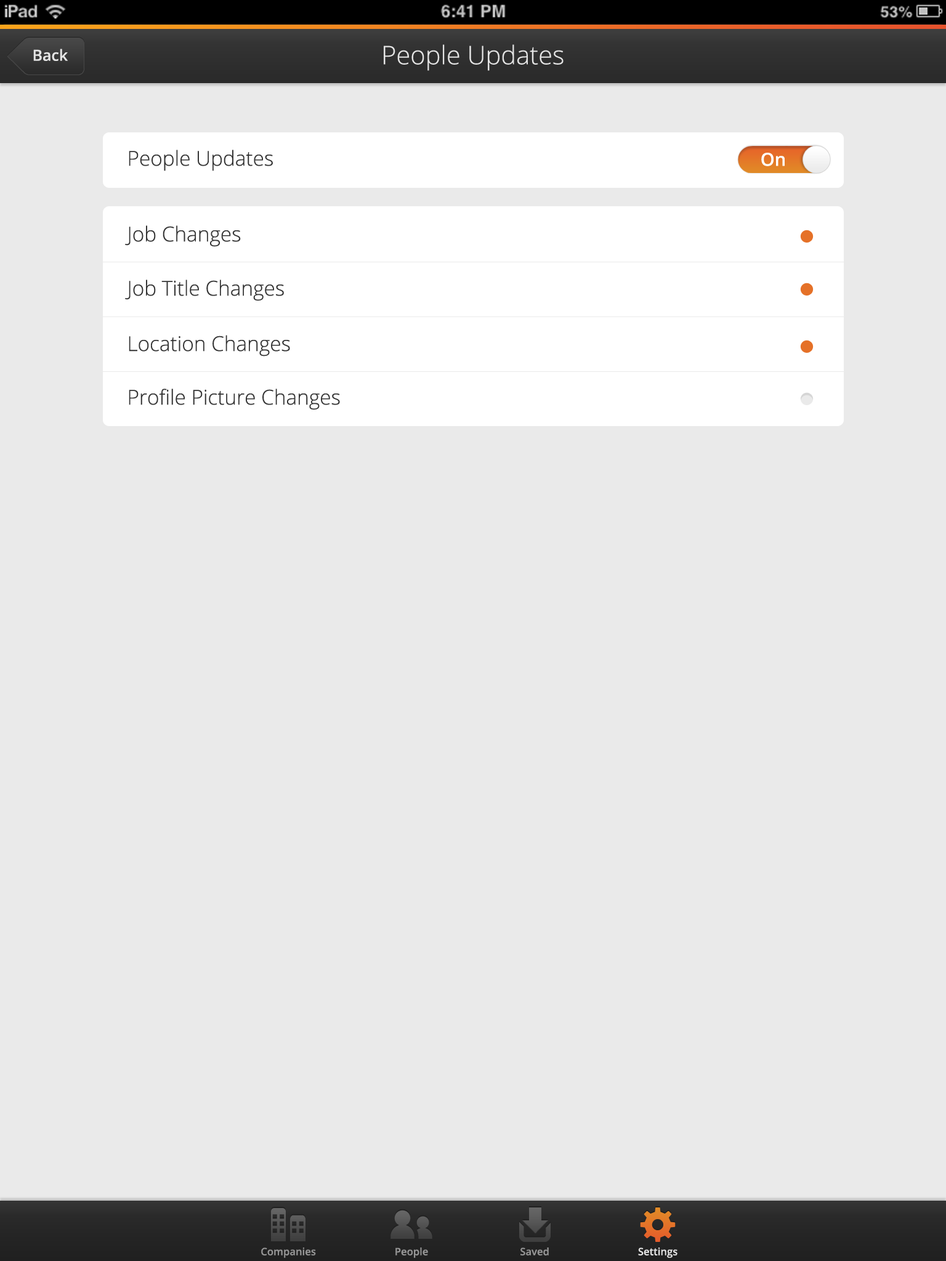
<style>
.page{position:relative;width:946px;height:1261px;background:#eaeaea}
.page>*{position:absolute;margin:0}
.t1{font:15.4px "OpenSans-Semibold";color:#e5e5e5}
.t2{font:25.7px "OpenSans-Light";color:#e5e5e5}
.t3{font:20.5px "OpenSans-Light";color:#343434}
.t4{font:18px "OpenSans-Semibold";color:#ffffff}
.t5{font:10.3px "OpenSans-Semibold";color:#969696}
.t6{font:10.3px "OpenSans-Semibold";color:#e5e5e5}
</style>
<div class="page">
<p class="t1" style="left:33px;top:49px;width:35px;height:12px">Back</p>
<p class="t2" style="left:384px;top:44px;width:179px;height:27px">People Updates</p>
<p class="t3" style="left:129px;top:150px;width:144px;height:21px">People Updates</p>
<p class="t4" style="left:761px;top:153px;width:23px;height:13px">On</p>
<p class="t3" style="left:125px;top:225px;width:116px;height:22px">Job Changes</p>
<p class="t3" style="left:125px;top:280px;width:159px;height:21px">Job Title Changes</p>
<p class="t3" style="left:129px;top:335px;width:161px;height:21px">Location Changes</p>
<p class="t3" style="left:129px;top:388px;width:211px;height:22px">Profile Picture Changes</p>
<p class="t5" style="left:261px;top:1247px;width:55px;height:11px">Companies</p>
<p class="t5" style="left:395px;top:1247px;width:33px;height:11px">People</p>
<p class="t5" style="left:520px;top:1247px;width:29px;height:8px">Saved</p>
<p class="t6" style="left:638px;top:1247px;width:39px;height:11px">Settings</p>
</div>
